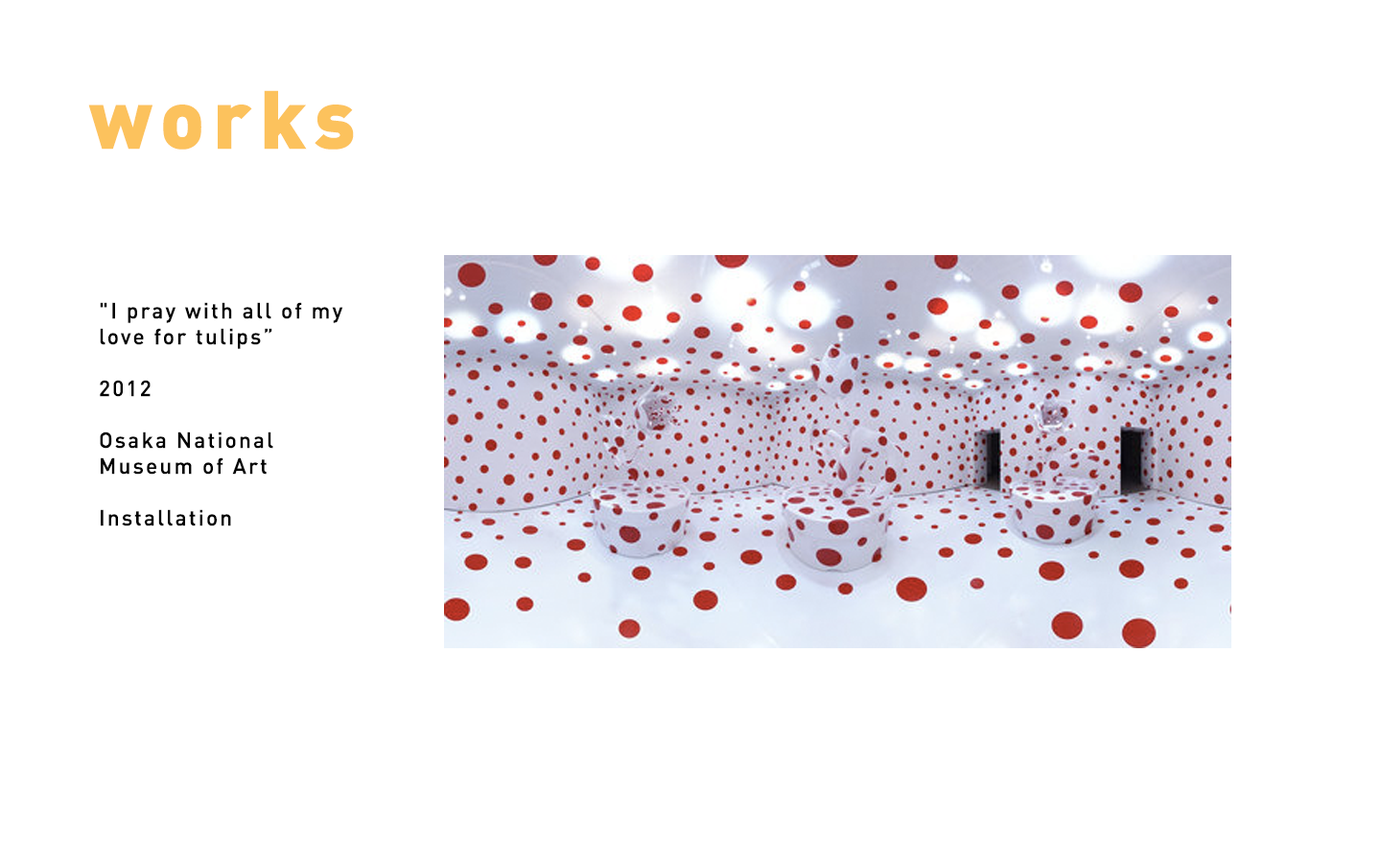
<style>
.page{position:relative;width:1381px;height:863px;background:#ffffff}
.page>*{position:absolute;margin:0}
.t1{font:81.3px "DIN-Black";letter-spacing:0.1em;color:#fcc25d}
.t2{font:21.6px "DIN-Medium";letter-spacing:0.1em;color:#000000}
</style>
<div class="page">
<p class="t1" style="left:88px;top:90px;width:266px;height:60px">works</p>
<p class="t2" style="left:100px;top:302px;width:243px;height:225px">"I pray with all of my love for tulips”<br><br>2012<br><br>Osaka National Museum of Art<br><br>Installation</p>
</div>
